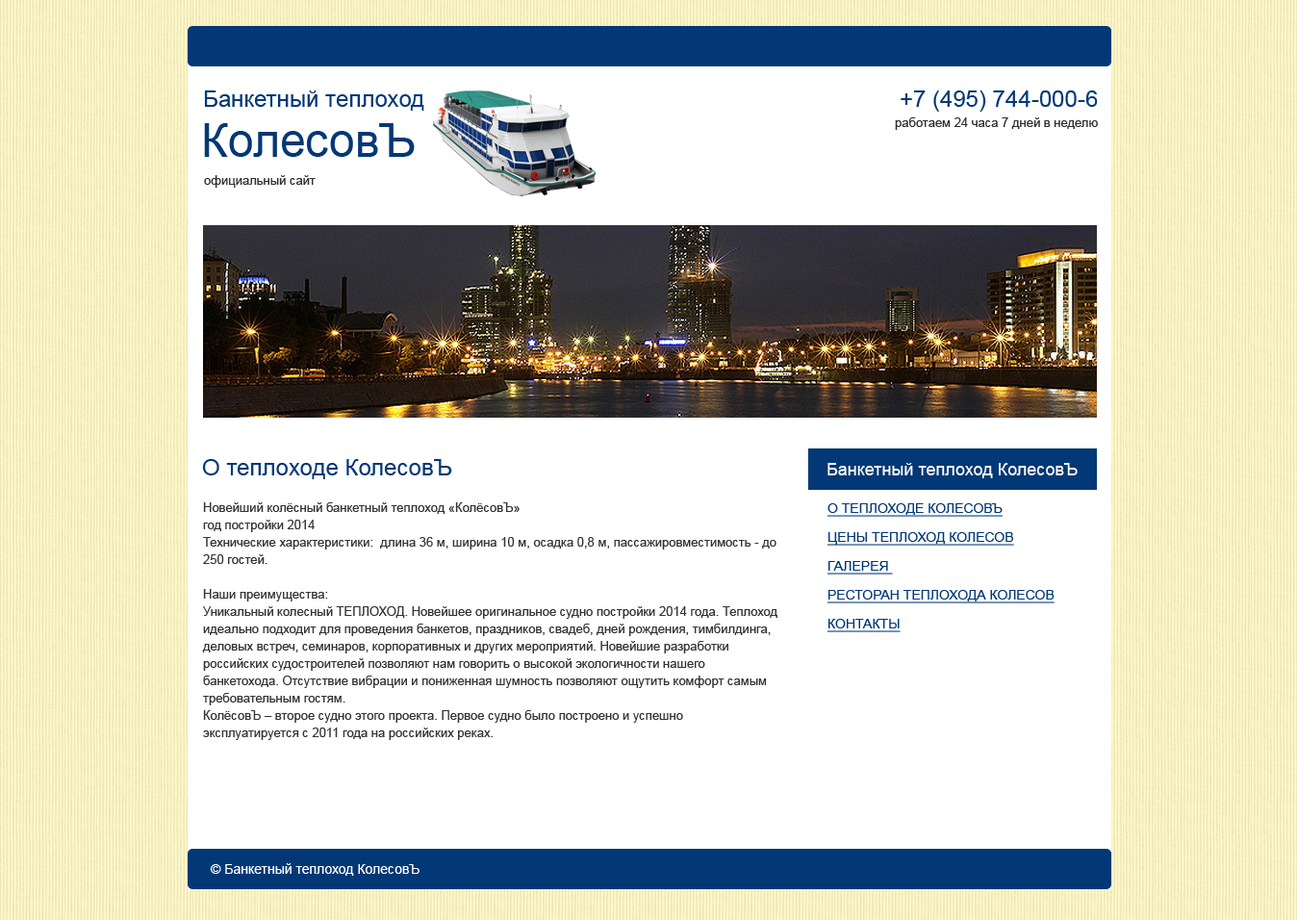
<style>
.page{position:relative;width:1297px;height:920px;background:#ffffff}
.page>*{position:absolute;margin:0}
.t1{font:23.1px "ArialMT";color:#023875}
.t2{font:46.2px "ArialMT";color:#023875}
.t3{font:12.5px "ArialMT";color:#303030}
.t4{font:17.3px "ArialMT";color:#ffffff}
.t5{font:12.5px/17.3px "ArialMT";color:#343434}
.t6{font:13.5px/28.9px "ArialMT";color:#023875;text-transform:uppercase;text-decoration:underline}
.t7{font:13.5px "ArialMT";color:#ffffff}
</style>
<div class="page">
<p class="t1" style="left:204px;top:90px;width:220px;height:21px">Банкетный теплоход</p>
<p class="t1" style="left:900px;top:90px;width:198px;height:22px">+7 (495) 744-000-6</p>
<p class="t2" style="left:204px;top:123px;width:211px;height:34px">КолесовЪ</p>
<p class="t3" style="left:895px;top:117px;width:203px;height:13px">работаем 24 часа 7 дней в неделю</p>
<p class="t3" style="left:204px;top:175px;width:112px;height:13px">официальный сайт</p>
<p class="t1" style="left:202px;top:459px;width:250px;height:20px">О теплоходе КолесовЪ</p>
<p class="t4" style="left:827px;top:463px;width:250px;height:15px">Банкетный теплоход КолесовЪ</p>
<p class="t5" style="left:202px;top:502px;width:575px;height:238px">Новейший колёсный банкетный теплоход «КолёсовЪ»<br>год постройки 2014<br>Технические характеристики:  длина 36 м, ширина 10 м, осадка 0,8 м, пассажировместимость - до 250 гостей. <br><br>Наши преимущества:<br>Уникальный колесный ТЕПЛОХОД. Новейшее оригинальное судно постройки 2014 года. Теплоход идеально подходит для проведения банкетов, праздников, свадеб, дней рождения, тимбилдинга, деловых встреч, семинаров, корпоративных и других мероприятий. Новейшие разработки российских судостроителей позволяют нам говорить о высокой экологичности нашего банкетохода. Отсутствие вибрации и пониженная шумность позволяют ощутить комфорт самым требовательным гостям.<br>КолёсовЪ – второе судно этого проекта. Первое судно было построено и успешно эксплуатируется с 2011 года на российских реках.</p>
<p class="t6" style="left:827px;top:503px;width:227px;height:129px">О теплоходе КолесовЪ<br>Цены Теплоход Колесов<br>Галерея <br>Ресторан теплохода Колесов<br>Контакты</p>
<p class="t7" style="left:210px;top:863px;width:209px;height:12px">© Банкетный теплоход КолесовЪ</p>
</div>
